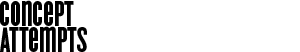
<style>
.page{position:relative;width:300px;height:52px;background:#ffffff}
.page>*{position:absolute;margin:0}
.t1{font:37px "CycloneLayers-Background";color:#000000}
</style>
<div class="page">
<p class="t1" style="left:0px;top:0px;width:74px;height:26px">Concept</p>
<p class="t1" style="left:0px;top:26px;width:87px;height:26px">Attempts</p>
</div>
